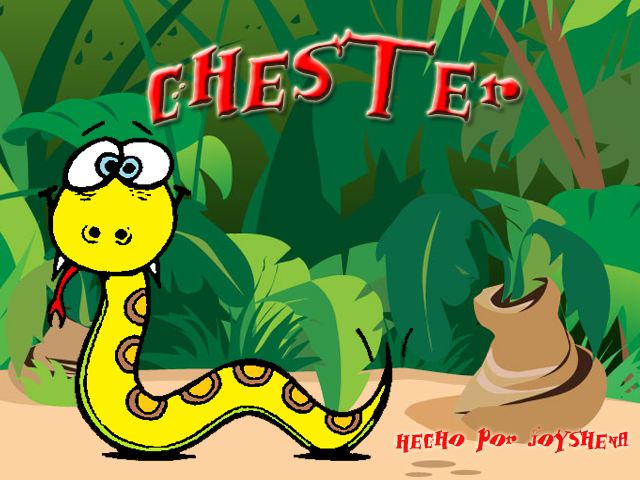
<style>
.page{position:relative;width:640px;height:480px}
.page>*{position:absolute;margin:0}
.t1{font:112px "BabOonjaZzbaSsoOn";font-style:italic}
.t2{font:30px "BabOonjaZzbaSsoOn";color:#f80e0e;font-style:italic}
</style>
<div class="page">
<p class="t1" style="left:148px;top:28px;width:373px;height:97px">Chester</p>
<p class="t2" style="left:395px;top:426px;width:234px;height:27px">Hecho por Joyshena</p>
</div>
